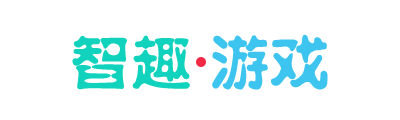
<style>
.page{position:relative;width:400px;height:120px;background:#ffffff}
.page>*{position:absolute;margin:0}
.t1{font:60px "GJJSZJW--GB1-0";color:#11d3bd}
.t2{font:60px "GJJSZJW--GB1-0";color:#3ec5ef}
</style>
<div class="page">
<p class="t1" style="left:72px;top:34px;width:256px;height:56px">智趣 <span class="t2">游戏</span></p>
</div>
